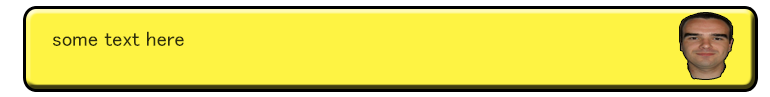
<style>
.page{position:relative;width:770px;height:97px;background:#fef343}
.page>*{position:absolute;margin:0}
.t1{font:21px "MS-PGothic";color:#2e2e0c}
</style>
<div class="page">
<p class="t1" style="left:53px;top:31px;width:131px;height:15px">some text here</p>
</div>
